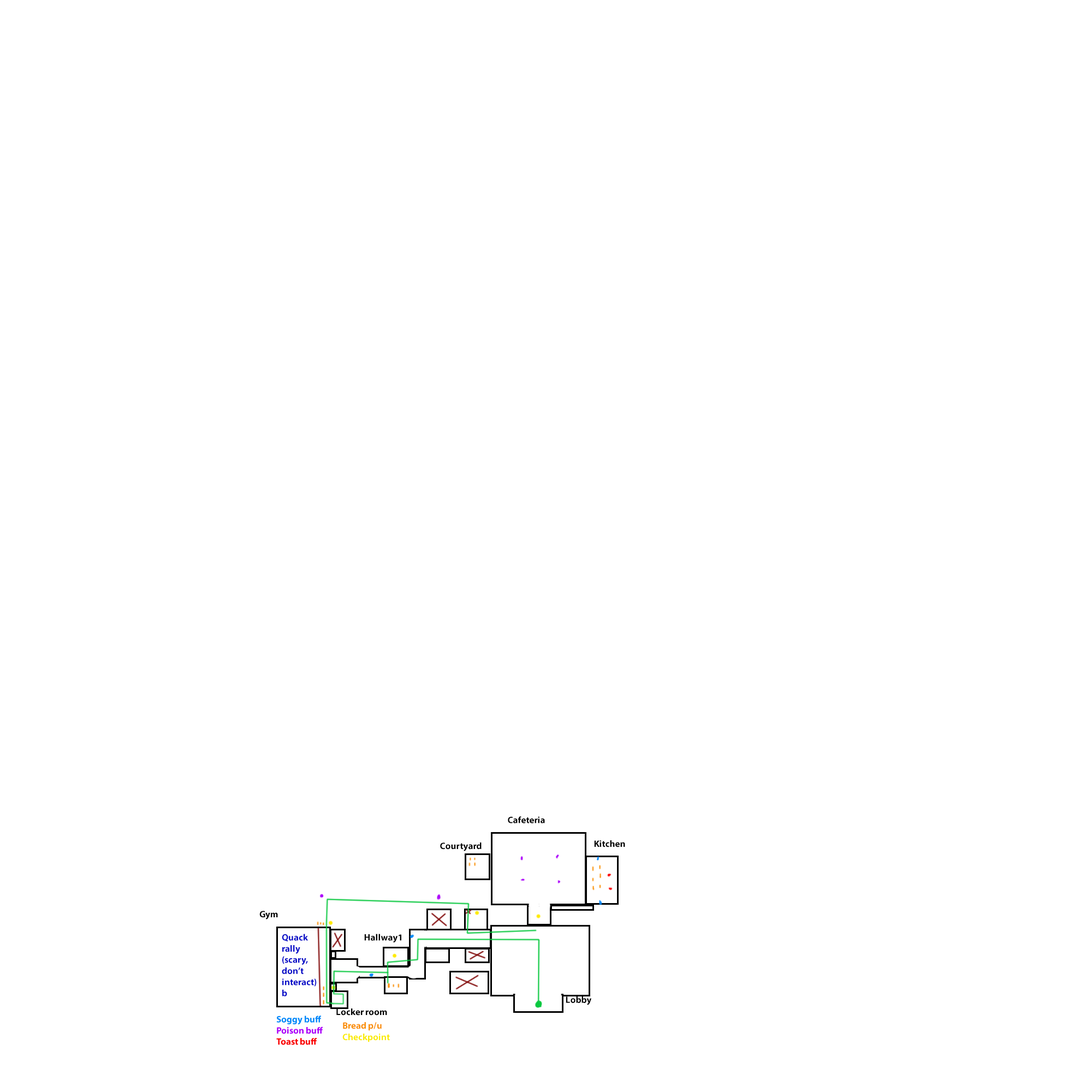
<style>
.page{position:relative;width:1092px;height:1092px;background:#ffffff}
.page>*{position:absolute;margin:0}
.t1{font:9.3px "MyriadPro-Bold";color:#000000}
.t2{font:9.3px "MyriadPro-Bold";color:#090dc8}
.t3{font:9.3px "MyriadPro-Bold";color:#fa9006}
.t4{font:9.3px "MyriadPro-Bold";color:#faec06}
</style>
<div class="page">
<p class="t1" style="left:508px;top:816px;width:37px;height:7px">Cafeteria</p>
<p class="t1" style="left:440px;top:842px;width:42px;height:9px">Courtyard<br>bb</p>
<p class="t1" style="left:594px;top:840px;width:31px;height:7px">Kitchen</p>
<p class="t1" style="left:259px;top:911px;width:19px;height:8px">Gym</p>
<p class="t2" style="left:282px;top:934px;width:35px;height:62px">Quack<br>rally<br>(scary,<br>don’t<br>interact)b</p>
<p class="t1" style="left:364px;top:934px;width:37px;height:9px">Hallway1</p>
<p class="t1" style="left:566px;top:996px;width:26px;height:9px">Lobby</p>
<p class="t1" style="left:336px;top:1008px;width:51px;height:8px">Locker room</p>
<p class="t3" style="left:343px;top:1022px;width:39px;height:9px">Bread p/u</p>
<p class="t4" style="left:342px;top:1034px;width:48px;height:8px">Checkpoint</p>
</div>
